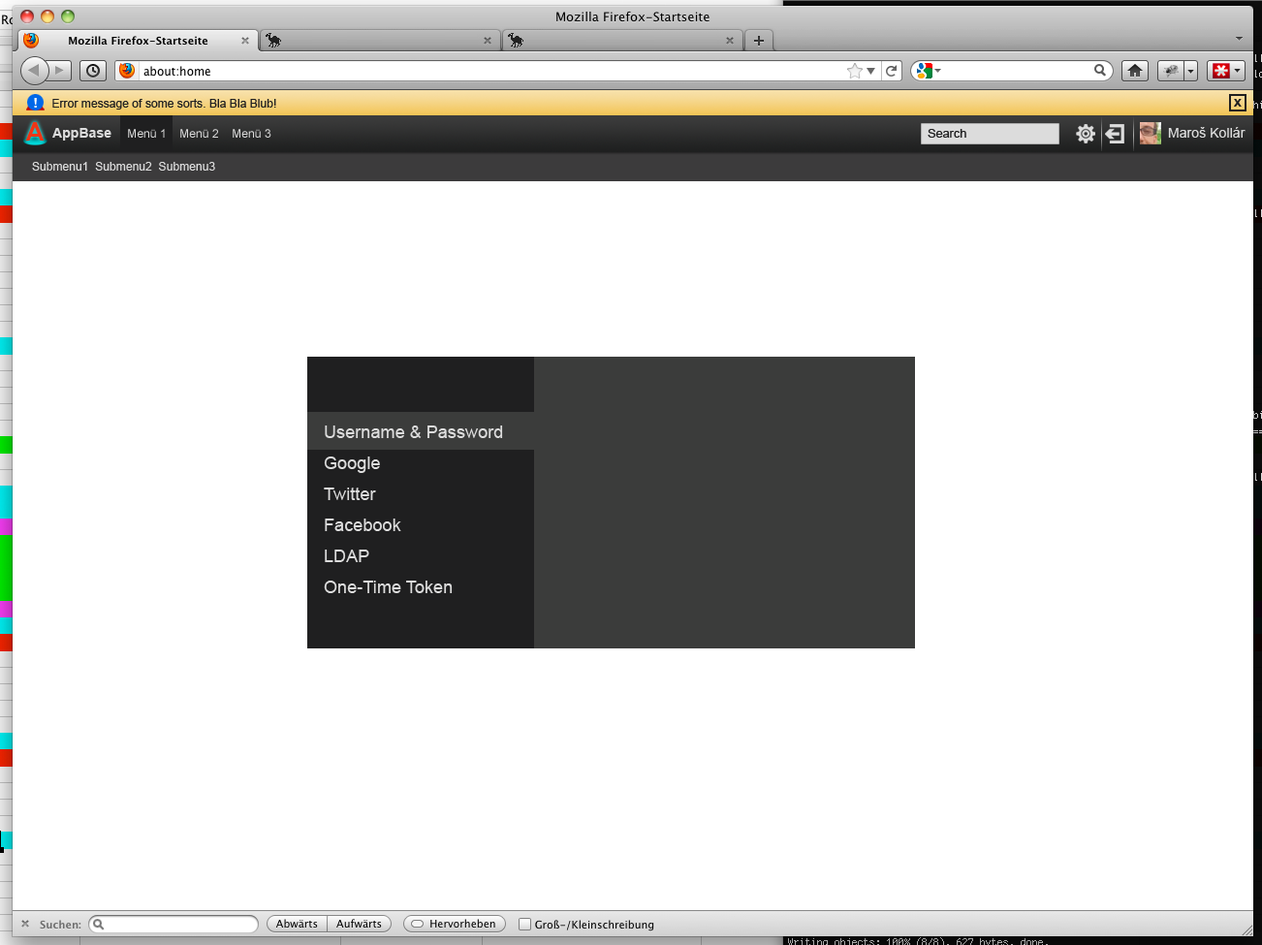
<style>
.page{position:relative;width:1262px;height:945px;background:#ffffff}
.page>*{position:absolute;margin:0}
.t1{font:13.6px "Arial-BoldMT";letter-spacing:0.005em;color:#ffffff;scale:1.05 1}
.t2{font:11.6px "ArialMT";letter-spacing:0.005em;color:#1f1f20}
.t3{font:13.6px "Arial-BoldMT";letter-spacing:0.005em;color:#1f1f20;scale:1.05 1}
.t4{font:26.2px "CenturyGothic-Bold";letter-spacing:0.005em;color:#ee3516}
.t5{font:13.6px "Arial-BoldMT";letter-spacing:0.005em;color:#dcdcdc}
.t6{font:11.6px "ArialMT";letter-spacing:0.005em;color:#dcdcdc}
.t7{font:11.6px "ArialMT";letter-spacing:0.005em;color:#1f1f20;scale:1.05 1}
.t8{font:13.6px "ArialMT";letter-spacing:0.005em;color:#dcdcdc}
.t9{font:17.4px/31px "ArialMT";letter-spacing:0.005em;color:#dcdcdc}
</style>
<div class="page">
<p class="t1" style="left:34px;top:99px;width:3px;height:10px">!</p>
<p class="t1" style="left:34px;top:98px;width:3px;height:10px">!</p>
<p class="t2" style="left:52px;top:99px;width:224px;height:11px">Error message of some sorts. Bla Bla Blub!</p>
<p class="t3" style="left:1234px;top:99px;width:8px;height:8px">x</p>
<p class="t4" style="left:25px;top:122px;width:20px;height:19px">A</p>
<p class="t5" style="left:52px;top:128px;width:59px;height:13px">AppBase</p>
<p class="t6" style="left:128px;top:129px;width:143px;height:9px">Menü 1    Menü 2    Menü 3</p>
<p class="t7" style="left:928px;top:129px;width:38px;height:9px">Search</p>
<p class="t8" style="left:1168px;top:127px;width:77px;height:11px">Maroš Kollár</p>
<p class="t6" style="left:32px;top:162px;width:183px;height:9px">Submenu1  Submenu2  Submenu3</p>
<p class="t9" style="left:324px;top:425px;width:179px;height:168px">Username &amp; Password<br>Google<br>Twitter<br>Facebook<br>LDAP<br>One-Time Token</p>
</div>
